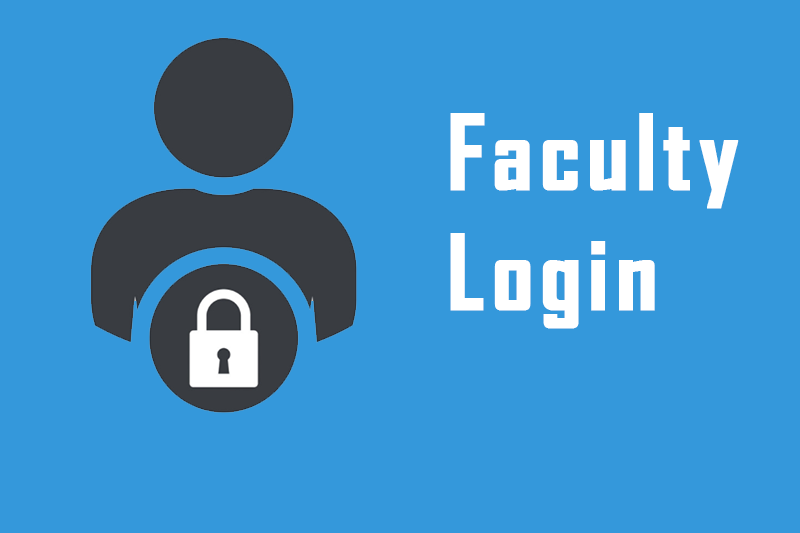
<style>
.page{position:relative;width:800px;height:533px;background:#3498db}
.page>*{position:absolute;margin:0}
.t1{font:100px "AgencyFB-Bold";letter-spacing:0.05em;color:#ffffff;font-weight:bold}
</style>
<div class="page">
<p class="t1" style="left:450px;top:113px;width:289px;height:216px">Faculty <br>Login</p>
</div>
